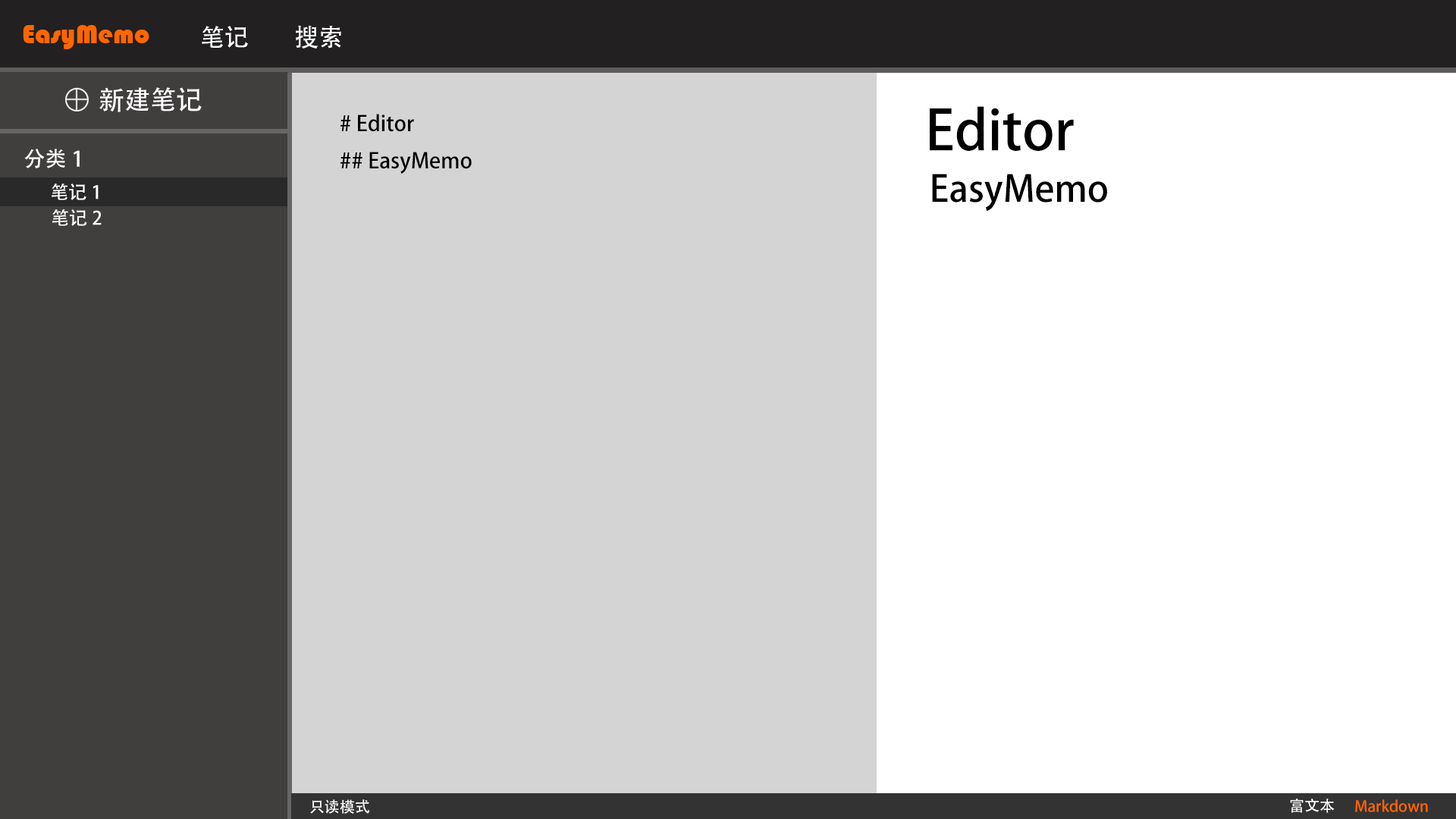
<style>
.page{position:relative;width:1456px;height:819px;background:#d4d4d4}
.page>*{position:absolute;margin:0}
.t1{font:27.3px "Bauhaus93";color:#ff6600}
.t2{font:24.3px "AdobeHeitiStd-Regular";color:#ffffff}
.t3{font:26.2px "AdobeHeitiStd-Regular";color:#ffffff}
.t4{font:21.2px "AdobeHeitiStd-Regular";color:#000000}
.t5{font:54.6px "AdobeHeitiStd-Regular";color:#000000}
.t6{font:21.2px "AdobeHeitiStd-Regular";color:#ffffff}
.t7{font:36.4px "AdobeHeitiStd-Regular";color:#000000}
.t8{font:18.2px "AdobeHeitiStd-Regular";color:#ffffff}
.t9{font:15.2px "AdobeHeitiStd-Regular";color:#ffffff}
.t10{font:15.2px "AdobeHeitiStd-Regular";color:#ff6600}
</style>
<div class="page">
<p class="t1" style="left:23px;top:25px;width:126px;height:24px">EasyMemo</p>
<p class="t2" style="left:202px;top:26px;width:46px;height:22px">笔记</p>
<p class="t2" style="left:296px;top:25px;width:45px;height:24px">搜索</p>
<p class="t3" style="left:99px;top:87px;width:103px;height:25px">新建笔记</p>
<p class="t4" style="left:340px;top:114px;width:132px;height:60px"># Editor<br>## EasyMemo</p>
<p class="t5" style="left:930px;top:106px;width:144px;height:45px">Editor</p>
<p class="t6" style="left:24px;top:149px;width:56px;height:19px">分类1</p>
<p class="t7" style="left:932px;top:174px;width:175px;height:38px">EasyMemo</p>
<p class="t8" style="left:52px;top:184px;width:47px;height:16px">笔记1</p>
<p class="t8" style="left:52px;top:209px;width:50px;height:17px">笔记2</p>
<p class="t9" style="left:310px;top:799px;width:60px;height:15px">只读模式</p>
<p class="t9" style="left:1290px;top:799px;width:45px;height:14px">富文本</p>
<p class="t10" style="left:1355px;top:799px;width:73px;height:13px">Markdown</p>
</div>
